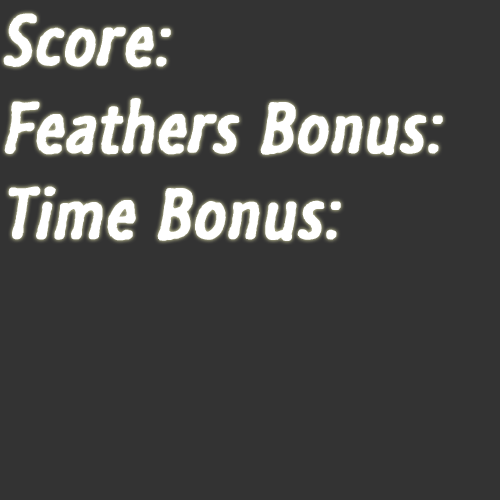
<style>
.page{position:relative;width:500px;height:500px;background:#333333}
.page>*{position:absolute;margin:0}
.t1{font:72px "SegoeMarker";color:#ffffff;font-weight:bold;font-style:italic}
</style>
<div class="page">
<p class="t1" style="left:3px;top:13px;width:440px;height:228px">Score:<br>Feathers Bonus:<br>Time Bonus:</p>
</div>
